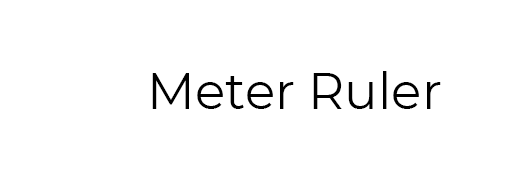
<style>
.page{position:relative;width:525px;height:180px;background:#ffffff}
.page>*{position:absolute;margin:0}
.t1{font:50px "Montserrat-Regular";color:#000000}
</style>
<div class="page">
<p class="t1" style="left:152px;top:71px;width:289px;height:38px">Meter Ruler</p>
</div>
